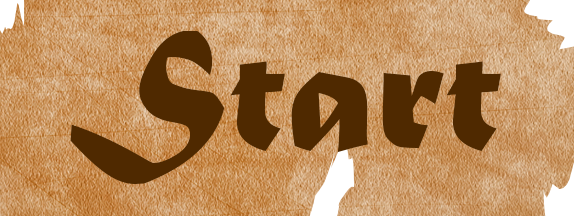
<style>
.page{position:relative;width:574px;height:216px}
.page>*{position:absolute;margin:0}
.t1{font:179.1px "MaturaMTScriptCapitals";color:#4f2900}
</style>
<div class="page">
<p class="t1" style="left:70px;top:31px;width:431px;height:153px">Start</p>
</div>
